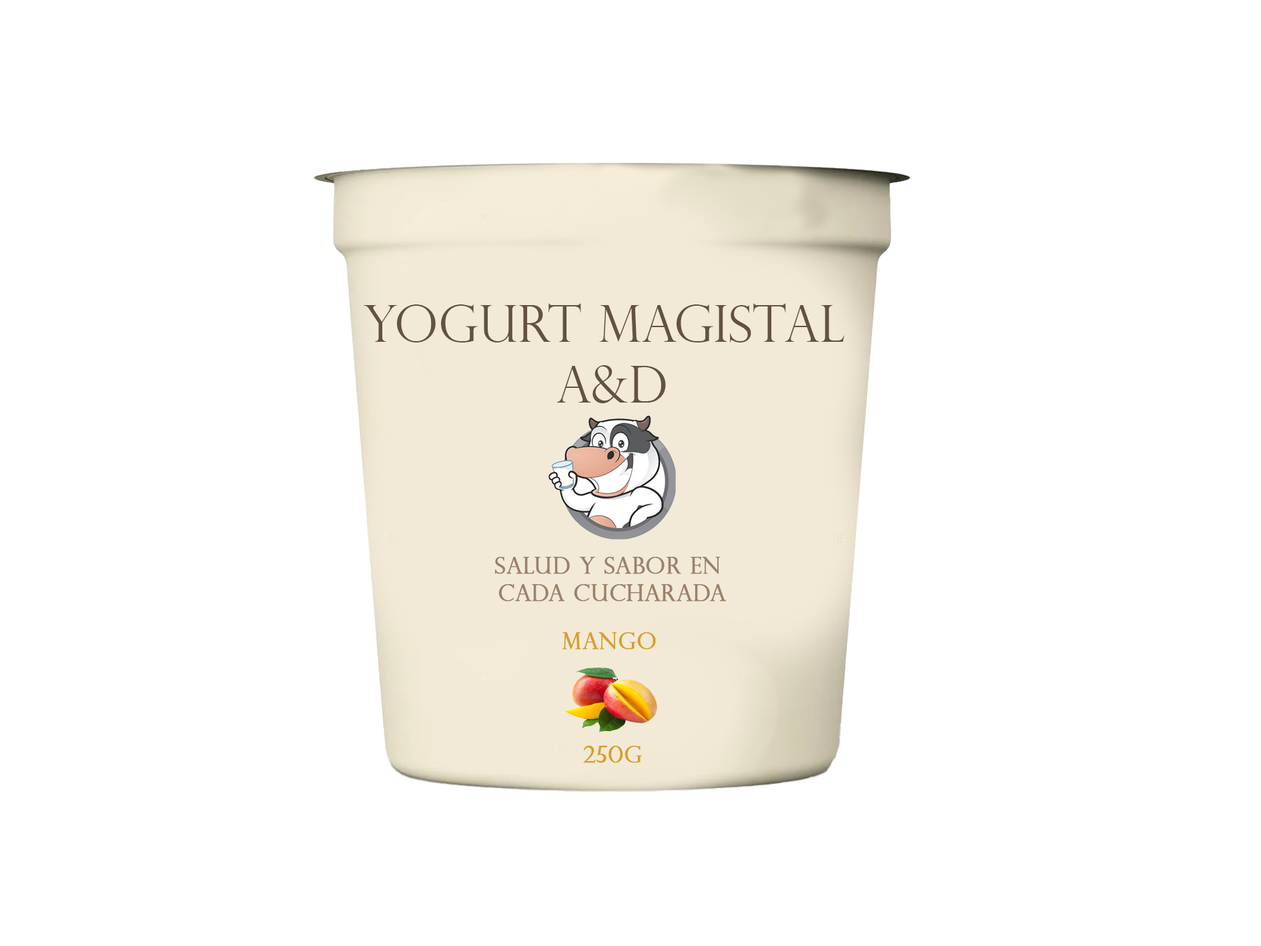
<style>
.page{position:relative;width:1261px;height:946px;background:#ffffff}
.page>*{position:absolute;margin:0}
.t1{font:50.8px "PerpetuaTitlingMT-Light";color:#635141}
.t2{font:22.9px "PerpetuaTitlingMT-Light";color:#9b816a;font-weight:bold}
.t3{font:22.9px "PerpetuaTitlingMT-Light";color:#d69f28;font-weight:bold}
</style>
<div class="page">
<p class="t1" style="left:363px;top:303px;width:482px;height:100px;text-align:center">Yogurt Magistal <br>A&amp;D</p>
<p class="t2" style="left:495px;top:557px;width:231px;height:44px;text-align:center">salud y sabor en <br>cada cucharada</p>
<p class="t3" style="left:562px;top:632px;width:94px;height:17px">Mango</p>
<p class="t3" style="left:583px;top:745px;width:60px;height:18px">250g</p>
</div>
